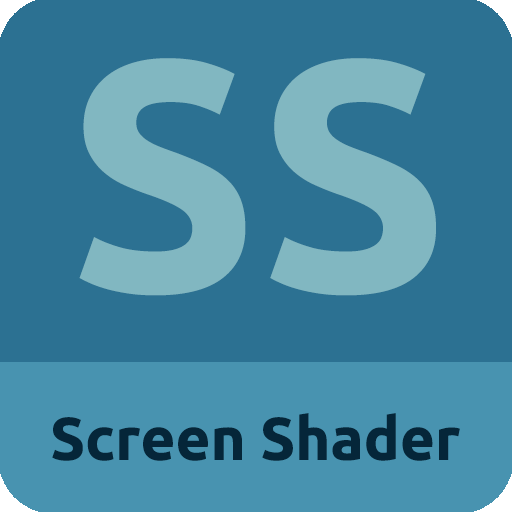
<style>
.page{position:relative;width:512px;height:512px;background:#2c7192}
.page>*{position:absolute;margin:0}
.t1{font:327.7px "Ubuntu-Bold";color:#81b7c1}
.t2{font:60px "Ubuntu-Bold";color:#052639}
</style>
<div class="page">
<p class="t1" style="left:79px;top:58px;width:357px;height:238px">SS</p>
<p class="t2" style="left:52px;top:413px;width:408px;height:48px">Screen Shader</p>
</div>
